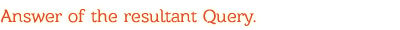
<style>
.page{position:relative;width:400px;height:30px;background:#ffffff}
.page>*{position:absolute;margin:0}
.t1{font:18px "Barkentina";color:#dd4b39}
</style>
<div class="page">
<p class="t1" style="left:1px;top:9px;width:255px;height:17px">Answer of the resultant Query.</p>
</div>
